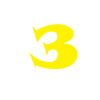
<style>
.page{position:relative;width:100px;height:100px;background:#ffffff}
.page>*{position:absolute;margin:0}
.t1{font:60px "SnapITC-Regular";color:#fff200}
</style>
<div class="page">
<p class="t1" style="left:29px;top:24px;width:49px;height:45px">3</p>
</div>
